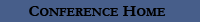
<style>
.page{position:relative;width:200px;height:22px;background:#475e8a}
.page>*{position:absolute;margin:0}
.t1{font:12px "Garamond-Bold";color:#000000}
.t2{font:16px "Garamond-Bold";color:#000000}
</style>
<div class="page">
<p class="t1" style="left:29px;top:6px;width:137px;height:10px"><span class="t2">C</span>ONFERENCE<span class="t2"> H</span>OME</p>
</div>
